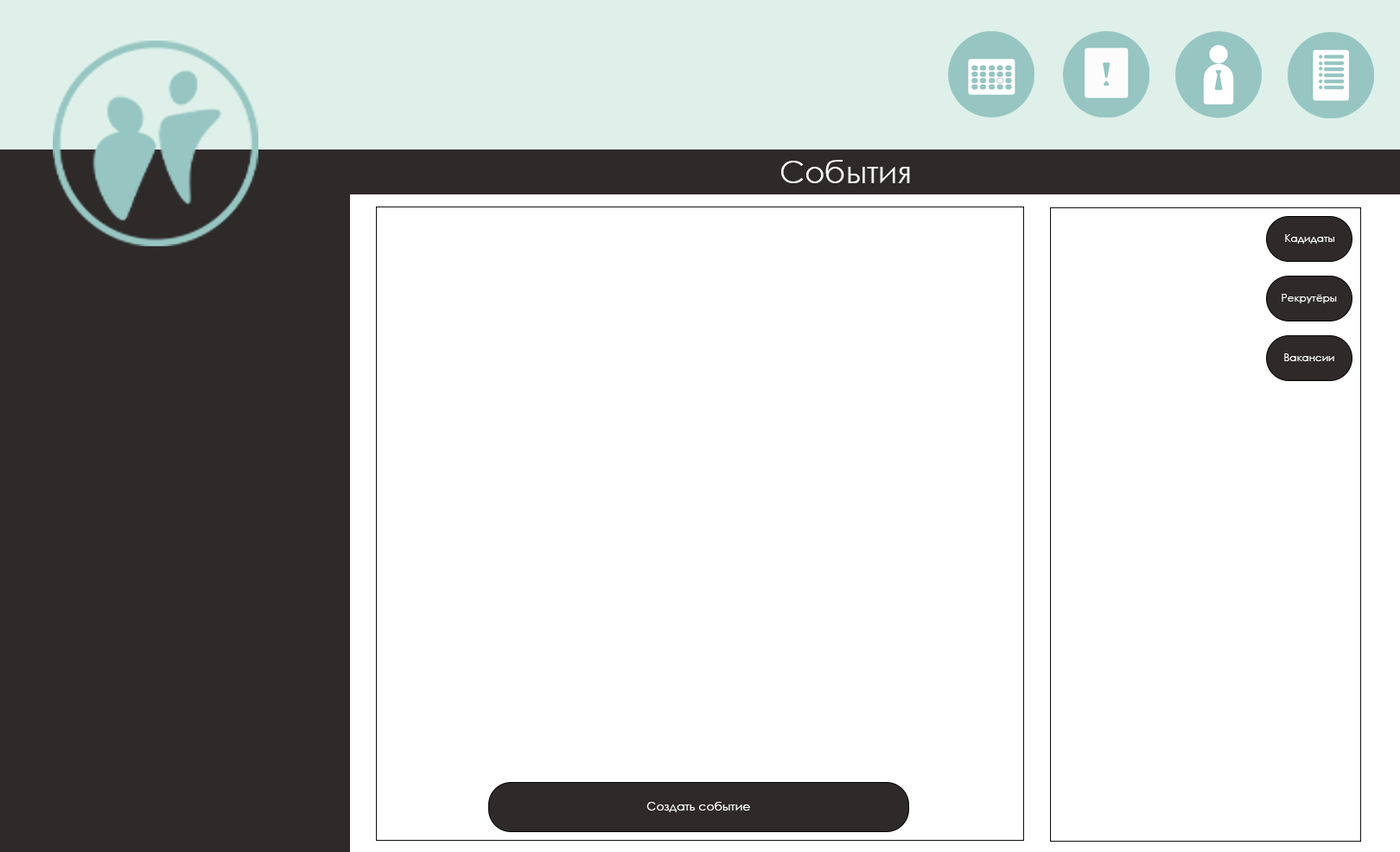
<style>
.page{position:relative;width:1400px;height:852px;background:#ffffff}
.page>*{position:absolute;margin:0}
.t1{font:31.1px "CenturyGothic";color:#ffffff}
.t2{font:10.4px "CenturyGothic";color:#ffffff}
.t3{font:12.1px "CenturyGothic";color:#ffffff}
</style>
<div class="page">
<p class="t1" style="left:781px;top:160px;width:129px;height:23px">События</p>
<p class="t2" style="left:1285px;top:234px;width:49px;height:10px">Кадидаты</p>
<p class="t2" style="left:1281px;top:294px;width:56px;height:9px">Рекрутёры</p>
<p class="t2" style="left:1284px;top:353px;width:50px;height:8px">Вакансии</p>
<p class="t3" style="left:646px;top:802px;width:104px;height:10px">Создать событие</p>
</div>
